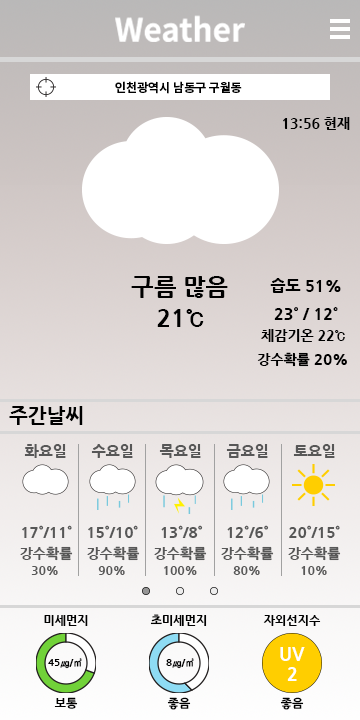
<style>
.page{position:relative;width:360px;height:720px}
.page>*{position:absolute;margin:0}
.t1{font:12px "NotoSansKR-Bold";color:#000000}
.t2{font:14px "NanumGothicExtraBold";color:#000000}
.t3{font:24px "NanumGothicExtraBold";color:#000000}
.t4{font:16px "NanumGothicExtraBold";color:#000000}
.t5{font:15px "NanumGothicExtraBold";color:#000000}
.t6{font:20px "NanumGothicExtraBold";color:#000000}
.t7{font:15px "NanumGothicExtraBold";color:#575757}
.t8{font:14px "NanumGothicExtraBold";color:#575757}
.t9{font:12px "NanumGothicExtraBold";color:#575757}
.t10{font:12px "NanumGothicExtraBold";color:#000000}
.t11{font:18px "NanumGothicExtraBold";color:#ffffff}
.t12{font:10px "NanumGothicExtraBold";color:#000000}
</style>
<div class="page">
<p class="t1" style="left:115px;top:81px;width:127px;height:13px">인천광역시 남동구 구월동</p>
<p class="t2" style="left:283px;top:117px;width:67px;height:13px">13:56 현재</p>
<p class="t3" style="left:131px;top:276px;width:97px;height:22px">구름 많음</p>
<p class="t4" style="left:270px;top:278px;width:71px;height:15px">습도 51%</p>
<p class="t3" style="left:157px;top:309px;width:47px;height:18px">21℃</p>
<p class="t4" style="left:274px;top:307px;width:64px;height:13px">23˚ / 12˚</p>
<p class="t2" style="left:261px;top:329px;width:84px;height:13px">체감기온 22℃</p>
<p class="t2" style="left:257px;top:352px;width:90px;height:15px">강수확률 <span class="t5">20%</span></p>
<p class="t6" style="left:9px;top:406px;width:74px;height:19px">주간날씨</p>
<p class="t7" style="left:24px;top:444px;width:42px;height:14px">화요일</p>
<p class="t7" style="left:91px;top:444px;width:42px;height:14px">수요일</p>
<p class="t7" style="left:159px;top:444px;width:42px;height:14px">목요일</p>
<p class="t7" style="left:226px;top:444px;width:42px;height:14px">금요일</p>
<p class="t7" style="left:293px;top:444px;width:42px;height:14px">토요일</p>
<p class="t7" style="left:22px;top:525px;width:50px;height:13px">17˚/11˚</p>
<p class="t7" style="left:88px;top:525px;width:50px;height:13px">15˚/10˚</p>
<p class="t7" style="left:161px;top:525px;width:42px;height:13px">13˚/8˚</p>
<p class="t7" style="left:227px;top:525px;width:42px;height:13px">12˚/6˚</p>
<p class="t7" style="left:289px;top:525px;width:51px;height:13px">20˚/15˚</p>
<p class="t8" style="left:20px;top:546px;width:53px;height:15px">강수확률</p>
<p class="t8" style="left:87px;top:546px;width:53px;height:15px">강수확률</p>
<p class="t8" style="left:154px;top:546px;width:53px;height:15px">강수확률</p>
<p class="t8" style="left:221px;top:546px;width:53px;height:15px">강수확률</p>
<p class="t8" style="left:288px;top:546px;width:53px;height:15px">강수확률</p>
<p class="t9" style="left:31px;top:566px;width:27px;height:9px">30%</p>
<p class="t9" style="left:98px;top:566px;width:27px;height:9px">90%</p>
<p class="t9" style="left:164px;top:566px;width:33px;height:9px">100%</p>
<p class="t9" style="left:233px;top:566px;width:27px;height:9px">80%</p>
<p class="t9" style="left:301px;top:566px;width:26px;height:9px">10%</p>
<p class="t10" style="left:44px;top:615px;width:44px;height:11px">미세먼지</p>
<p class="t10" style="left:150px;top:614px;width:57px;height:12px">초미세먼지</p>
<p class="t10" style="left:263px;top:615px;width:58px;height:11px">자외선지수</p>
<p class="t11" style="left:280px;top:647px;width:25px;height:14px">UV</p>
<p class="t12" style="left:48px;top:658px;width:34px;height:11px">45㎍/㎥</p>
<p class="t12" style="left:166px;top:658px;width:28px;height:11px">8㎍/㎥</p>
<p class="t11" style="left:287px;top:667px;width:10px;height:14px">2</p>
<p class="t10" style="left:54px;top:697px;width:24px;height:12px">보통</p>
<p class="t10" style="left:167px;top:697px;width:24px;height:13px">좋음</p>
<p class="t10" style="left:280px;top:697px;width:24px;height:13px">좋음</p>
</div>
